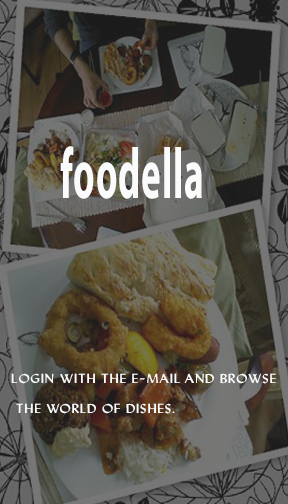
<style>
.page{position:relative;width:288px;height:504px}
.page>*{position:absolute;margin:0}
.t1{font:71.8px "MyriadPro-Bold";letter-spacing:0.025em;color:#fbfbfc;scale:0.52 1}
.t2{font:14px/30.3px "Lydian";letter-spacing:0.025em;color:#fbfbfc;text-transform:uppercase;scale:1.16 1}
</style>
<div class="page">
<p class="t1" style="left:60px;top:146px;width:142px;height:53px">foodella</p>
<p class="t2" style="left:11px;top:373px;width:265px;height:41px">Login with the e-mail and browse<br> the world of dishes.</p>
</div>
